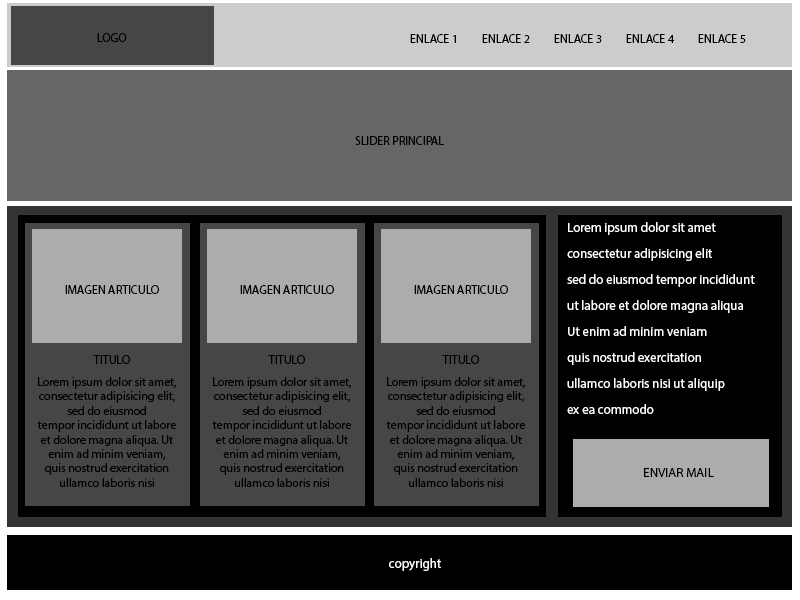
<style>
.page{position:relative;width:800px;height:600px;background:#000000}
.page>*{position:absolute;margin:0}
.t1{font:12px "MyriadPro-Regular";color:#000000}
.t2{font:13px/26px "MyriadPro-Regular";color:#ffffff}
.t3{font:13px "MyriadPro-Regular";color:#000000}
.t4{font:13px "MyriadPro-Regular";color:#ffffff}
</style>
<div class="page">
<p class="t1" style="left:97px;top:33px;width:30px;height:9px">LOGO</p>
<p class="t1" style="left:410px;top:34px;width:336px;height:9px">ENLACE 1 ENLACE 2 ENLACE 3  ENLACE 4 ENLACE 5</p>
<p class="t1" style="left:355px;top:136px;width:89px;height:9px">SLIDER PRINCIPAL</p>
<p class="t2" style="left:567px;top:222px;width:188px;height:192px">Lorem ipsum dolor sit amet<br>consectetur adipisicing elit<br>sed do eiusmod tempor incididunt<br>ut labore et dolore magna aliqua<br>Ut enim ad minim veniam<br>quis nostrud exercitation<br>ullamco laboris nisi ut aliquip<br>ex ea commodo</p>
<p class="t1" style="left:65px;top:285px;width:94px;height:9px">IMAGEN ARTICULO</p>
<p class="t1" style="left:240px;top:285px;width:94px;height:9px">IMAGEN ARTICULO</p>
<p class="t1" style="left:414px;top:285px;width:94px;height:9px">IMAGEN ARTICULO</p>
<p class="t1" style="left:93px;top:355px;width:37px;height:9px">TITULO</p>
<p class="t1" style="left:268px;top:355px;width:37px;height:9px">TITULO</p>
<p class="t1" style="left:442px;top:355px;width:37px;height:9px">TITULO</p>
<p class="t1" style="left:37px;top:377px;width:139px;height:110px;text-align:center">Lorem ipsum dolor sit amet, consectetur adipisicing elit, sed do eiusmod<br>tempor incididunt ut labore et dolore magna aliqua. Ut enim ad minim veniam,<br>quis nostrud exercitation ullamco laboris nisi</p>
<p class="t1" style="left:212px;top:377px;width:139px;height:110px;text-align:center">Lorem ipsum dolor sit amet, consectetur adipisicing elit, sed do eiusmod<br>tempor incididunt ut labore et dolore magna aliqua. Ut enim ad minim veniam,<br>quis nostrud exercitation ullamco laboris nisi</p>
<p class="t1" style="left:386px;top:377px;width:139px;height:110px;text-align:center">Lorem ipsum dolor sit amet, consectetur adipisicing elit, sed do eiusmod<br>tempor incididunt ut labore et dolore magna aliqua. Ut enim ad minim veniam,<br>quis nostrud exercitation ullamco laboris nisi</p>
<p class="t3" style="left:644px;top:468px;width:70px;height:9px">ENVIAR MAIL</p>
<p class="t4" style="left:389px;top:558px;width:52px;height:13px">copyright</p>
</div>
